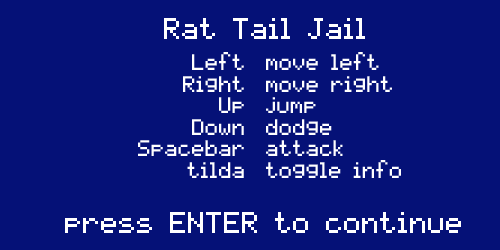
<style>
.page{position:relative;width:500px;height:250px;background:#051177}
.page>*{position:absolute;margin:0}
.t1{font:24px "pixelmix";color:#ffffff}
.t2{font:18px "pixelmix";color:#ffffff}
</style>
<div class="page">
<p class="t1" style="left:164px;top:18px;width:201px;height:21px">Rat Tail Jail</p>
<p class="t2" style="left:138px;top:52px;width:106px;height:126px;text-align:right">Left<br>Right<br>Up<br>Down<br>Spacebar<br>tilda</p>
<p class="t2" style="left:266px;top:52px;width:135px;height:126px">move left<br>move right<br>jump<br>dodge<br>attack<br>toggle info</p>
<p class="t1" style="left:65px;top:212px;width:396px;height:21px">press ENTER to continue</p>
</div>
